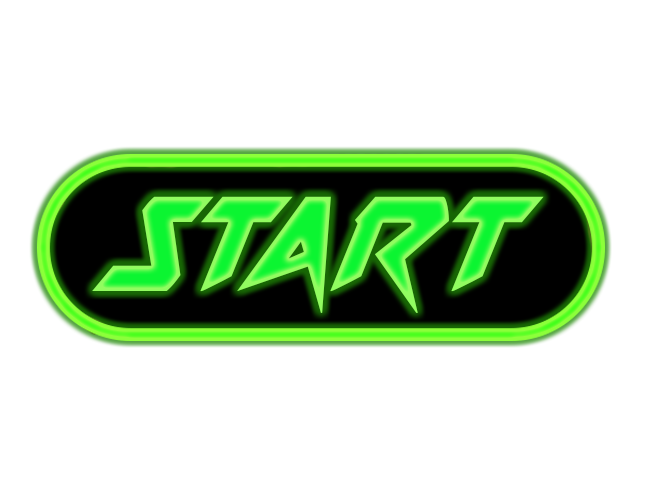
<style>
.page{position:relative;width:648px;height:504px;background:#ffffff}
.page>*{position:absolute;margin:0}
.t1{font:164.3px "SkirmisherCondensedItalic"}
</style>
<div class="page">
<p class="t1" style="left:92px;top:196px;width:452px;height:117px">START</p>
</div>
